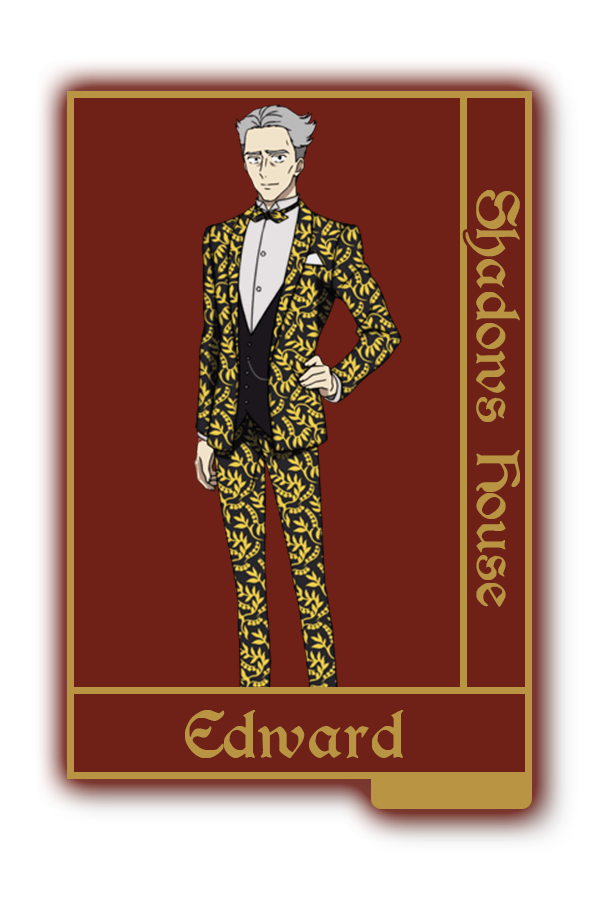
<style>
.page{position:relative;width:600px;height:900px;background:#6f2117}
.page>*{position:absolute;margin:0}
.t1{font:67.9px "Augusta-Regular";color:#b89443}
.t2{font:75px "Augusta-Regular";color:#b89443}
</style>
<div class="page">
<p class="t1" style="left:465px;top:190px;width:55px;height:417px;rotate:90deg">Shadows House</p>
<p class="t2" style="left:185px;top:710px;width:219px;height:48px">Edward</p>
</div>
